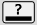
<style>
.page{position:relative;width:37px;height:25px;background:#f0f0f0}
.page>*{position:absolute;margin:0}
.t1{font:14px "Tahoma";color:#000000;font-weight:bold}
</style>
<div class="page">
<p class="t1" style="left:15px;top:4px;width:7px;height:11px">?</p>
</div>
